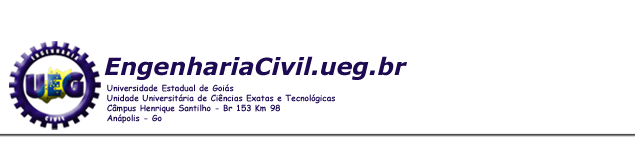
<style>
.page{position:relative;width:635px;height:150px;background:#ffffff}
.page>*{position:absolute;margin:0}
.t1{font:23.7px "Verdana-BoldItalic";color:#1e0a53}
.t2{font:8.3px "ComicSansMS-Bold";color:#1e0a53}
</style>
<div class="page">
<p class="t1" style="left:104px;top:56px;width:303px;height:24px">EngenhariaCivil.ueg.br</p>
<p class="t2" style="left:107px;top:84px;width:228px;height:40px">Universidade Estadual de Goiás<br>Unidade Universitária de Ciências Exatas e Tecnológicas<br>Câmpus Henrique Santilho - Br 153 Km 98<br>Anápolis - Go</p>
</div>
